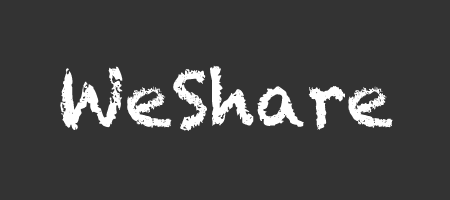
<style>
.page{position:relative;width:450px;height:200px;background:#333333}
.page>*{position:absolute;margin:0}
.t1{font:75px "Chalkduster";color:#fffefe}
</style>
<div class="page">
<p class="t1" style="left:60px;top:65px;width:333px;height:66px">WeShare</p>
</div>
